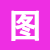
<style>
.page{position:relative;width:50px;height:50px;background:#ee2ee3}
.page>*{position:absolute;margin:0}
.t1{font:34px "AdobeHeitiStd-Regular";color:#ffffff;font-weight:bold}
</style>
<div class="page">
<p class="t1" style="left:11px;top:10px;width:28px;height:31px">图</p>
</div>
